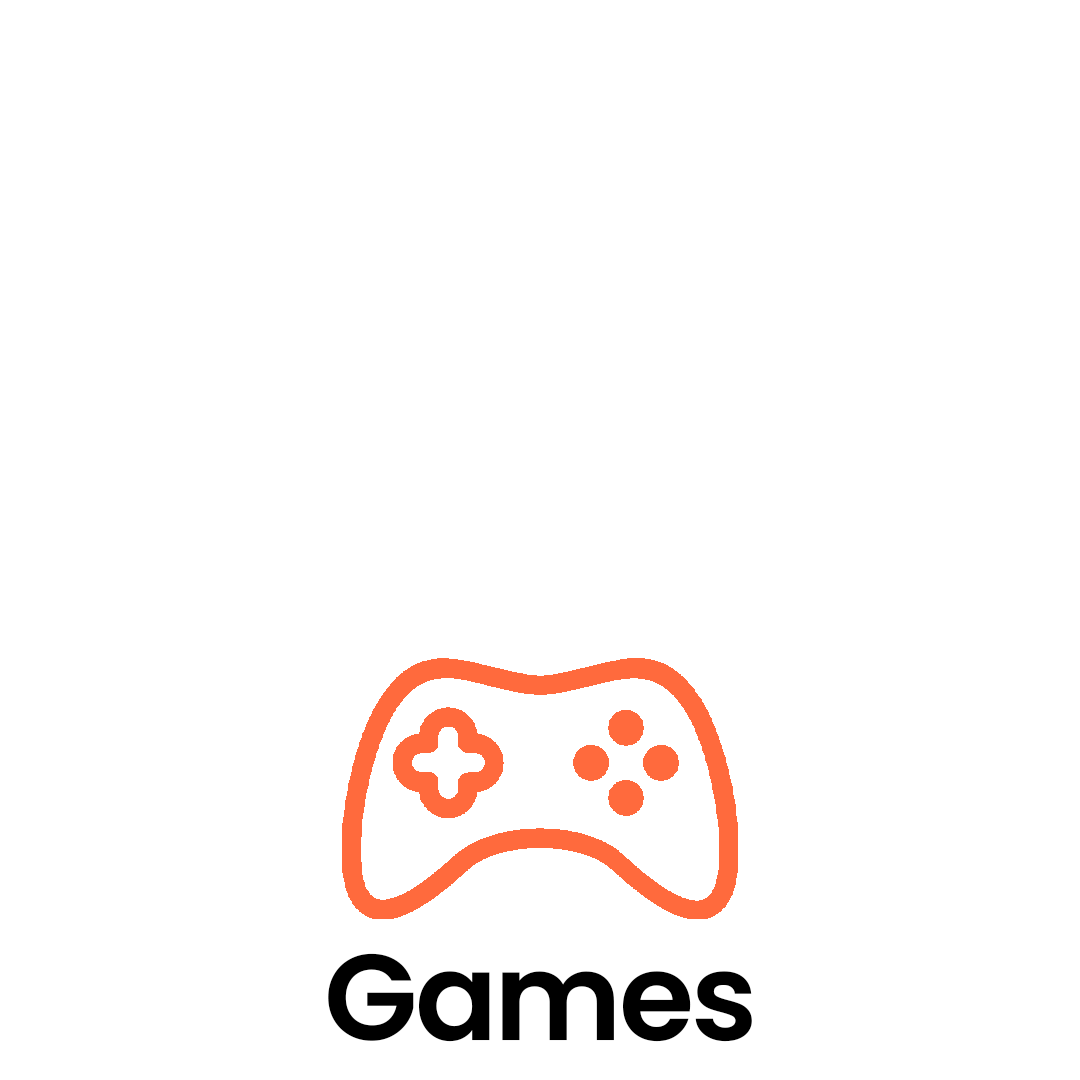
<style>
.page{position:relative;width:1080px;height:1080px;background:#ffffff}
.page>*{position:absolute;margin:0}
.t1{font:121.8px "Poppins-SemiBold";letter-spacing:-0.025em;color:#000000}
</style>
<div class="page">
<p class="t1" style="left:328px;top:953px;width:424px;height:89px">Games</p>
</div>
